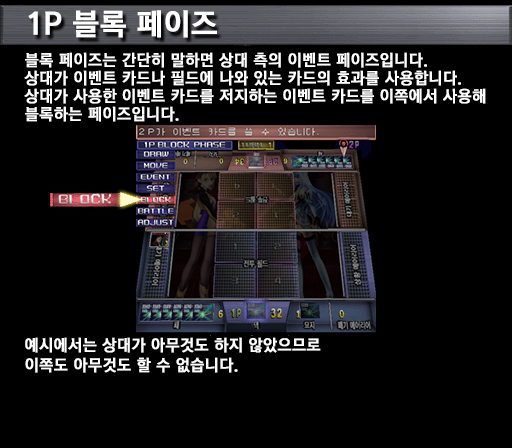
<style>
.page{position:relative;width:512px;height:448px;background:#000000}
.page>*{position:absolute;margin:0}
.t1{font:30px "KoreanGD15-R";color:#ffffff;font-weight:bold}
.t2{font:16px/18px "KoreanGD15-R";color:#ffffff;font-weight:bold}
.t3{font:16px/20px "KoreanGD15-R";color:#ffffff;font-weight:bold}
</style>
<div class="page">
<p class="t1" style="left:28px;top:10px;width:189px;height:28px">1P 블록 페이즈</p>
<p class="t2" style="left:24px;top:52px;width:462px;height:70px">블록 페이즈는 간단히 말하면 상대 측의 이벤트 페이즈입니다.<br>상대가 이벤트 카드나 필드에 나와 있는 카드의 효과를 사용합니다.<br>상대가 사용한 이벤트 카드를 저지하는 이벤트 카드를 이쪽에서 사용해<br>블록하는 페이즈입니다.</p>
<p class="t3" style="left:25px;top:337px;width:296px;height:36px">예시에서는 상대가 아무것도 하지 않았으므로<br>이쪽도 아무것도 할 수 없습니다.</p>
</div>
